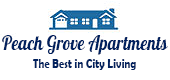
<style>
.page{position:relative;width:170px;height:80px;background:#ffffff}
.page>*{position:absolute;margin:0}
.t1{font:20px "Galada-Regular";color:#01215e;scale:0.86 1}
.t2{font:13.3px "BerlinSansFBDemi-Bold";color:#01215e;scale:0.78 1}
</style>
<div class="page">
<p class="t1" style="left:2px;top:35px;width:166px;height:20px">Peach Grove Apartments</p>
<p class="t2" style="left:33px;top:59px;width:103px;height:11px">The Best in City Living</p>
</div>
